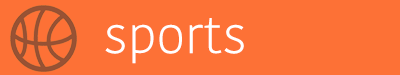
<style>
.page{position:relative;width:400px;height:75px;background:#fd7136}
.page>*{position:absolute;margin:0}
.t1{font:52px "KohinoorDevanagari-Light";color:#ffffff}
</style>
<div class="page">
<p class="t1" style="left:105px;top:18px;width:139px;height:46px">sports</p>
</div>
